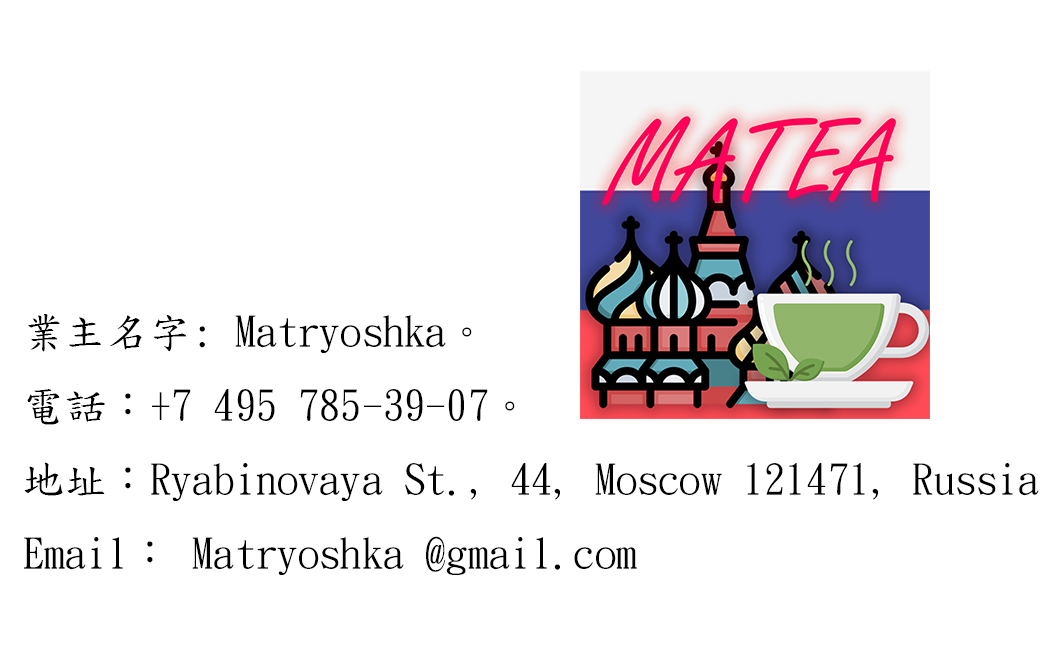
<style>
.page{position:relative;width:1063px;height:650px;background:#ffffff}
.page>*{position:absolute;margin:0}
.t1{font:42.3px "DFKaiShu-SB-Estd-BF";color:#000000}
</style>
<div class="page">
<p class="t1" style="left:24px;top:314px;width:1015px;height:261px">業主名字: Matryoshka。<br>電話：+7 495 785-39-07。<br>地址：Ryabinovaya St., 44, Moscow 121471, Russia<br>Email： Matryoshka @gmail.com</p>
</div>
